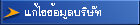
<style>
.page{position:relative;width:140px;height:25px}
.page>*{position:absolute;margin:0}
.t1{font:15.3px "EucrosiaDSE";color:#ffffff;scale:1.12 1}
</style>
<div class="page">
<p class="t1" style="left:25px;top:3px;width:76px;height:16px">á¡éä¢¢éÍÁÙÅºÃÔÉÑ·</p>
</div>
